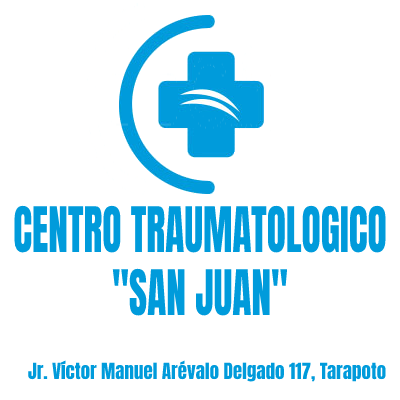
<style>
.page{position:relative;width:400px;height:400px;background:#ffffff}
.page>*{position:absolute;margin:0}
.t1{font:53.2px "Anton-Regular";color:#009bdb;scale:0.74 1}
.t2{font:19px "Anton-Regular";color:#009bdb}
</style>
<div class="page">
<p class="t1" style="left:14px;top:205px;width:372px;height:111px;text-align:center">CENTRO TRAUMATOLOGICO<br>"SAN JUAN"</p>
<p class="t2" style="left:28px;top:360px;width:358px;height:22px">Jr. Víctor Manuel Arévalo Delgado 117, Tarapoto</p>
</div>
